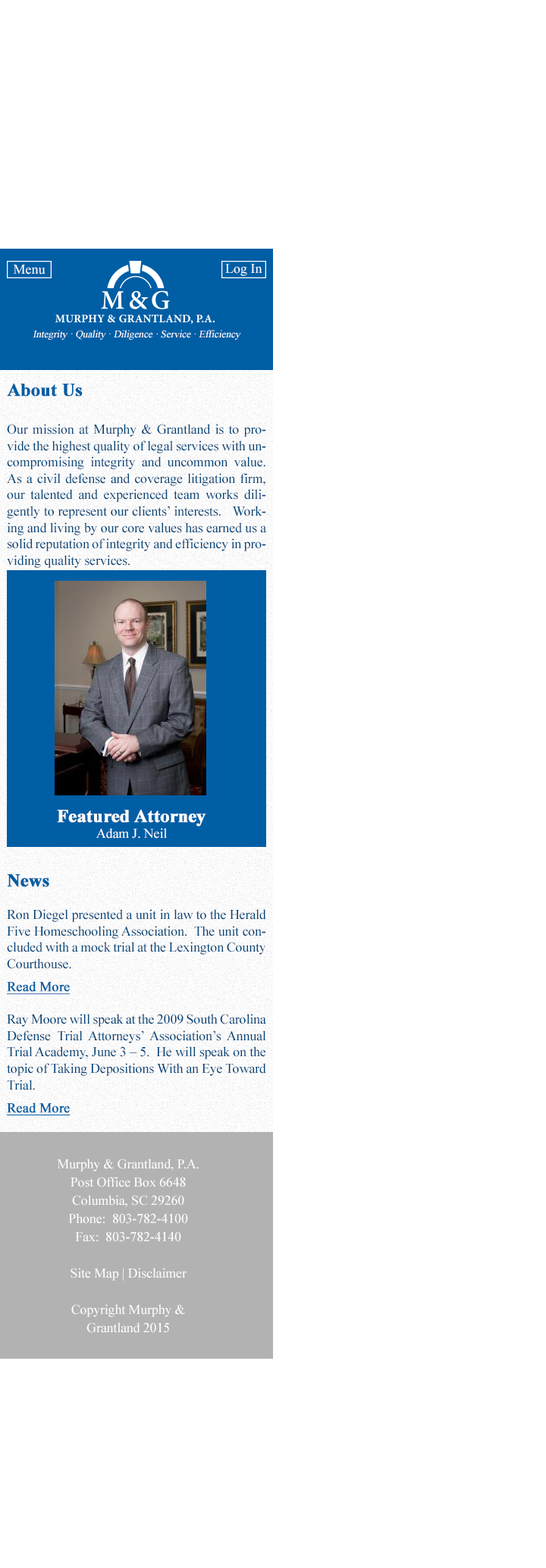
<style>
.page{position:relative;width:546px;height:1568px;background:#ffffff}
.page>*{position:absolute;margin:0}
.t1{font:13.6px "TimesNewRomanPSMT";color:#ffffff}
.t2{font:10.2px "TimesNewRomanPSMT";letter-spacing:-0.01em;color:#ffffff;font-style:italic}
.t3{font:13.6px "TimesNewRomanPSMT";letter-spacing:-0.01em;color:#004478}
.t4{font:18.2px "TimesNewRomanPS-BoldMT";letter-spacing:-0.01em;color:#005ea5;font-weight:bold}
.t5{font:18.2px "TimesNewRomanPS-BoldMT";letter-spacing:-0.01em;color:#ffffff;font-weight:bold}
.t6{font:13.6px "TimesNewRomanPSMT";letter-spacing:-0.01em;color:#ffffff}
.t7{font:13.6px/22.7px "TimesNewRomanPSMT";letter-spacing:-0.01em;color:#005ea5;font-weight:bold;text-decoration:underline}
.t8{font:13.6px/18.2px "TimesNewRomanPSMT";letter-spacing:-0.01em;color:#ffffff}
</style>
<div class="page">
<p class="t1" style="left:13px;top:265px;width:32px;height:9px">Menu</p>
<p class="t1" style="left:225px;top:264px;width:37px;height:12px">Log In</p>
<p class="t2" style="left:33px;top:330px;width:208px;height:10px">Integrity · Quality · Diligence · Service · Efficiency</p>
<p class="t3" style="left:7px;top:383px;width:260px;height:185px"><span class="t4">About Us<br><br></span>Our mission at Murphy &amp; Grantland is to provide the highest quality of legal services with uncompromising integrity and uncommon value.  As a civil defense and coverage litigation firm, our talented and experienced team works diligently to represent our clients’ interests.   Working and living by our core values has earned us a solid reputation of integrity and efficiency in providing quality services.</p>
<p class="t5" style="left:57px;top:809px;width:149px;height:30px;text-align:center">Featured Attorney<br><span class="t6">Adam J. Neil</span></p>
<p class="t3" style="left:7px;top:874px;width:259px;height:241px;text-align:justify"><span class="t4">News<br><br></span>Ron Diegel presented a unit in law to the Herald Five Homeschooling Association.  The unit concluded with a mock trial at the Lexington County Courthouse.<br><span class="t7">Read More<br><br></span>Ray Moore will speak at the 2009 South Carolina Defense Trial Attorneys’ Association’s Annual Trial Academy, June 3 – 5.  He will speak on the topic of Taking Depositions With an Eye Toward Trial.<br><span class="t7">Read More</span></p>
<p class="t8" style="left:57px;top:1159px;width:142px;height:174px;text-align:center">Murphy &amp; Grantland, P.A.<br>Post Office Box 6648<br>Columbia, SC 29260<br>Phone:  803-782-4100<br>Fax:  803-782-4140<br><br>Site Map | Disclaimer<br><br>Copyright Murphy &amp; Grantland 2015</p>
</div>
